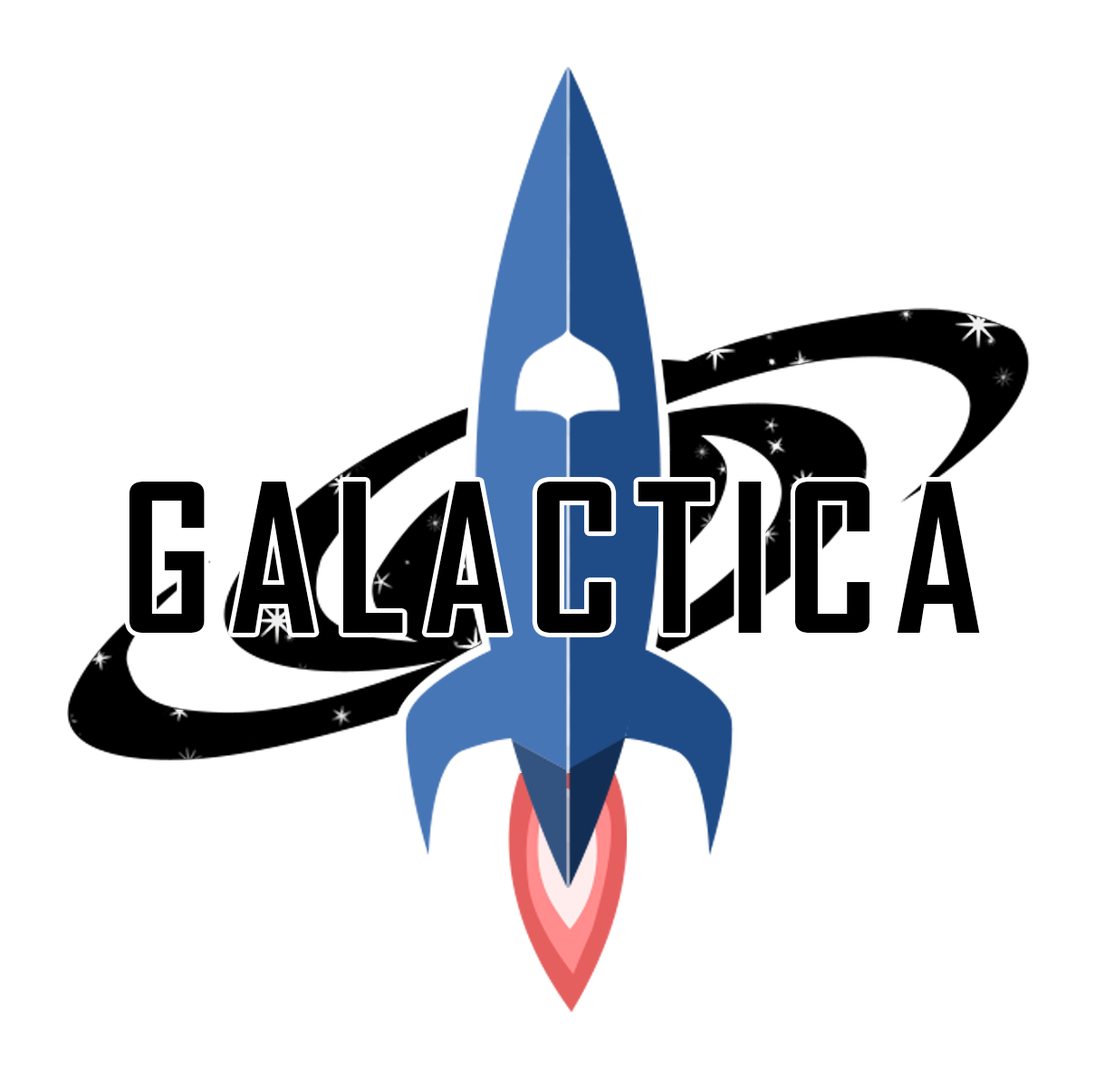
<style>
.page{position:relative;width:1114px;height:1070px;background:#ffffff}
.page>*{position:absolute;margin:0}
.t1{font:197.6px "AgencyFB-Bold";letter-spacing:0.08em;color:#000000}
</style>
<div class="page">
<p class="t1" style="left:129px;top:482px;width:851px;height:151px">GALACTICA</p>
</div>
